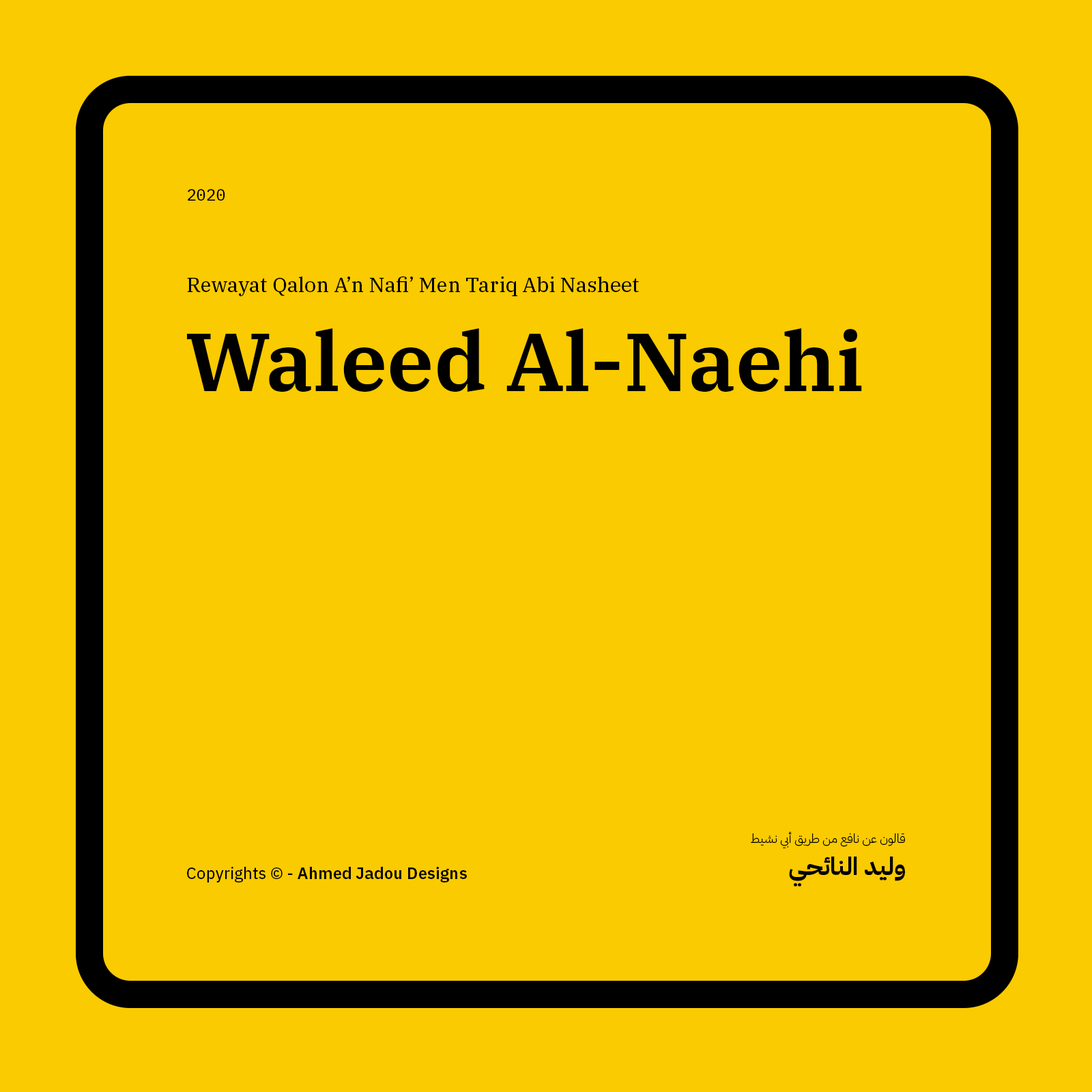
<style>
.page{position:relative;width:1092px;height:1092px;background:#facb00}
.page>*{position:absolute;margin:0}
.t1{font:16.4px "IBMPlexMono-Text";color:#000000}
.t2{font:20.5px "IBMPlexSerif-Text";color:#000000}
.t3{font:81.9px "IBMPlexSerif-SemiBold";color:#000000}
.t4{font:12.3px "IBMPlexArabic-Light";color:#000000}
.t5{font:24.6px "IBMPlexArabic-Bold";color:#000000}
.t6{font:16.4px "IBMPlexSans-SemiBold";color:#000000}
.t7{font:16.4px "IBMPlexSans-Text";color:#000000}
</style>
<div class="page">
<p class="t1" style="left:188px;top:189px;width:37px;height:12px">2020</p>
<p class="t2" style="left:187px;top:276px;width:452px;height:20px">Rewayat Qalon A’n Nafi’ Men Tariq Abi Nasheet</p>
<p class="t3" style="left:187px;top:328px;width:675px;height:64px">Waleed Al-Naehi</p>
<p class="t4" style="left:751px;top:831px;width:154px;height:17px">قالون عن نافع من طريق أبي نشيط</p>
<p class="t5" style="left:789px;top:857px;width:116px;height:30px">وليد النائحي</p>
<p class="t6" style="left:187px;top:867px;width:280px;height:15px"><span class="t7">Copyrights © - </span>Ahmed Jadou Designs</p>
</div>
